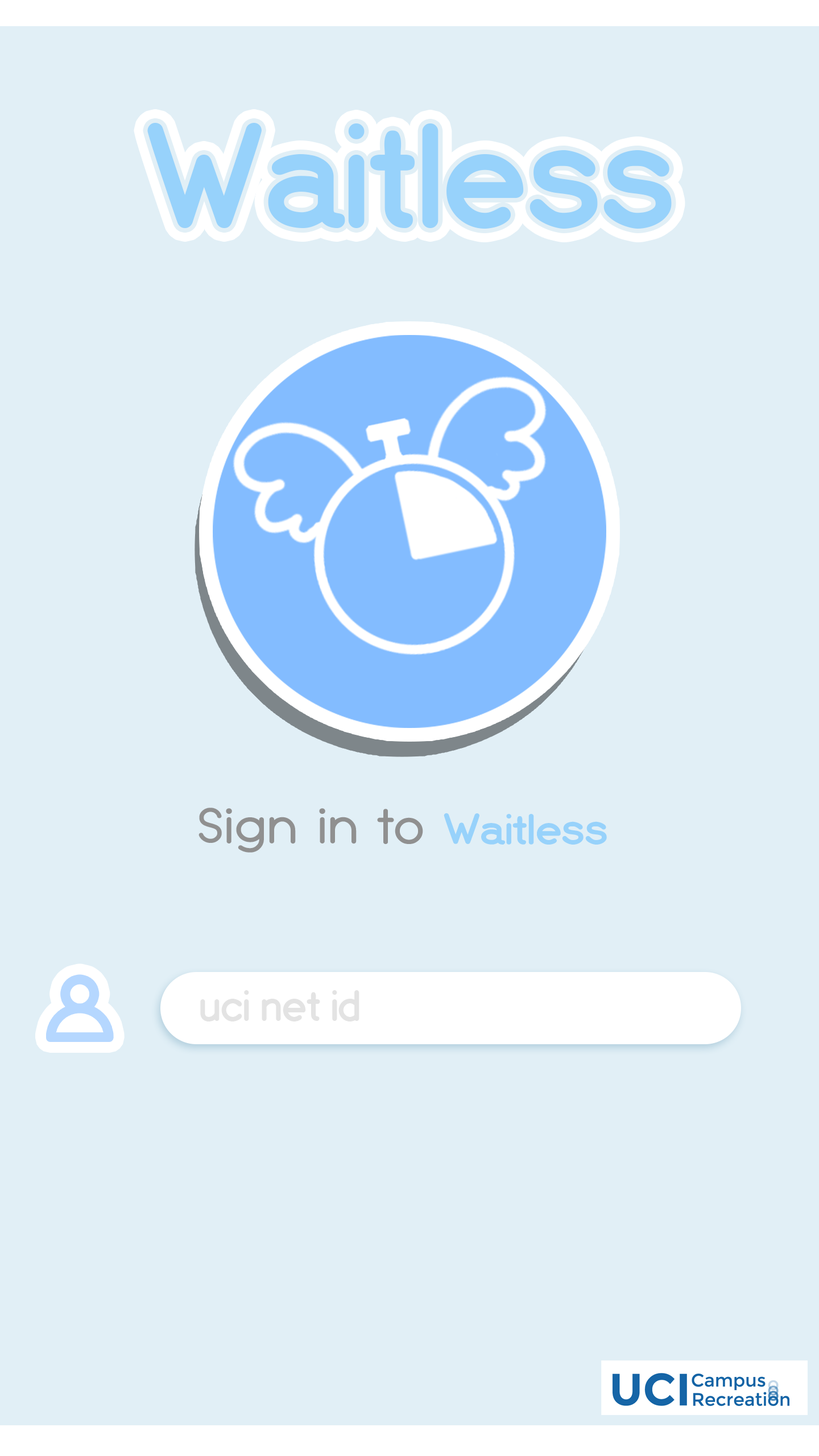
<style>
.page{position:relative;width:819px;height:1456px;background:#e1eff6}
.page>*{position:absolute;margin:0}
.t1{font:163.8px "EspressoDolce";color:#97d2fb}
.t2{font:47.8px "TypoGroteskRounded";color:#909090;scale:1.06 1}
.t3{font:47.8px "EspressoDolce";color:#97d2fb;scale:1.06 1}
.t4{font:47.8px "EspressoDolce";color:#e3e3e3}
</style>
<div class="page">
<p class="t1" style="left:147px;top:123px;width:525px;height:106px">Waitless</p>
<p class="t2" style="left:198px;top:808px;width:409px;height:45px">Sign in to <span class="t3">Waitless</span></p>
<p class="t4" style="left:200px;top:990px;width:159px;height:31px">uci net id</p>
</div>
